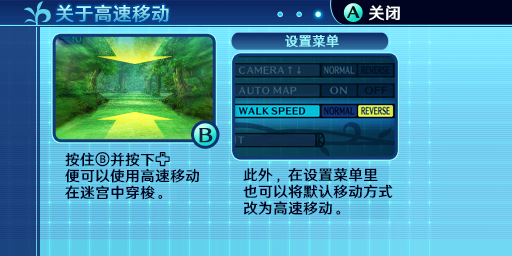
<style>
.page{position:relative;width:512px;height:256px}
.page>*{position:absolute;margin:0}
.t1{font:18.7px "HYWenHei-FEW";letter-spacing:0.025em}
.t2{font:16px "HYWenHei-FEW";letter-spacing:0.025em;color:#fefefe}
.t3{font:13.3px "HYWenHei-FEW";letter-spacing:0.025em;color:#94f7ff}
.t4{font:14.7px/16.7px "HYWenHei-FEW";letter-spacing:0.025em;color:#000421}
</style>
<div class="page">
<p class="t1" style="left:56px;top:4px;width:113px;height:19px">关于高速移动</p>
<p class="t2" style="left:369px;top:5px;width:31px;height:16px">关闭</p>
<p class="t3" style="left:285px;top:34px;width:54px;height:14px">设置菜单</p>
<p class="t4" style="left:243px;top:167px;width:150px;height:48px">此外，在设置菜单里<br>也可以将默认移动方式<br>改为高速移动。</p>
</div>
